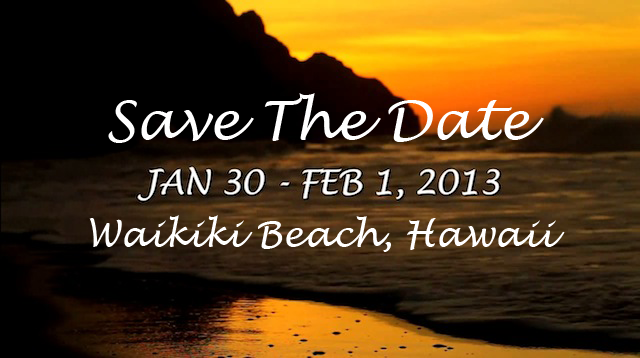
<style>
.page{position:relative;width:640px;height:358px}
.page>*{position:absolute;margin:0}
.t1{font:54px "LucidaHandwriting-Italic";color:#ffffff}
.t2{font:36px "LucidaHandwriting-Italic";color:#ffffff}
</style>
<div class="page">
<p class="t1" style="left:108px;top:93px;width:436px;height:50px">Save The Date</p>
<p class="t2" style="left:89px;top:215px;width:476px;height:37px">Waikiki Beach, Hawaii</p>
</div>
